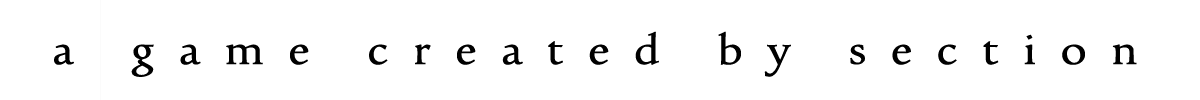
<style>
.page{position:relative;width:1200px;height:100px;background:#ffffff}
.page>*{position:absolute;margin:0}
.t1{font:48px "UrduTypesetting";letter-spacing:0.5em;color:#000000}
</style>
<div class="page">
<p class="t1" style="left:54px;top:31px;width:1083px;height:46px">a game created by section</p>
</div>
